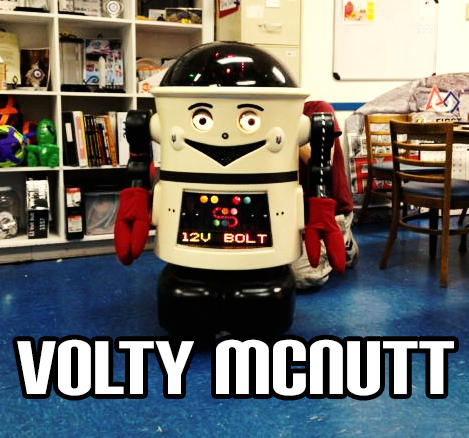
<style>
.page{position:relative;width:469px;height:438px}
.page>*{position:absolute;margin:0}
.t1{font:90px "CarbonBlock";color:#ffffff}
</style>
<div class="page">
<p class="t1" style="left:17px;top:339px;width:437px;height:57px">VOLTY MCNUTT</p>
</div>
